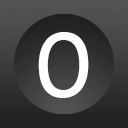
<style>
.page{position:relative;width:128px;height:128px}
.page>*{position:absolute;margin:0}
.t1{font:100px "Consolas";color:#ffffff}
</style>
<div class="page">
<p class="t1" style="left:38px;top:32px;width:51px;height:66px">O</p>
</div>
